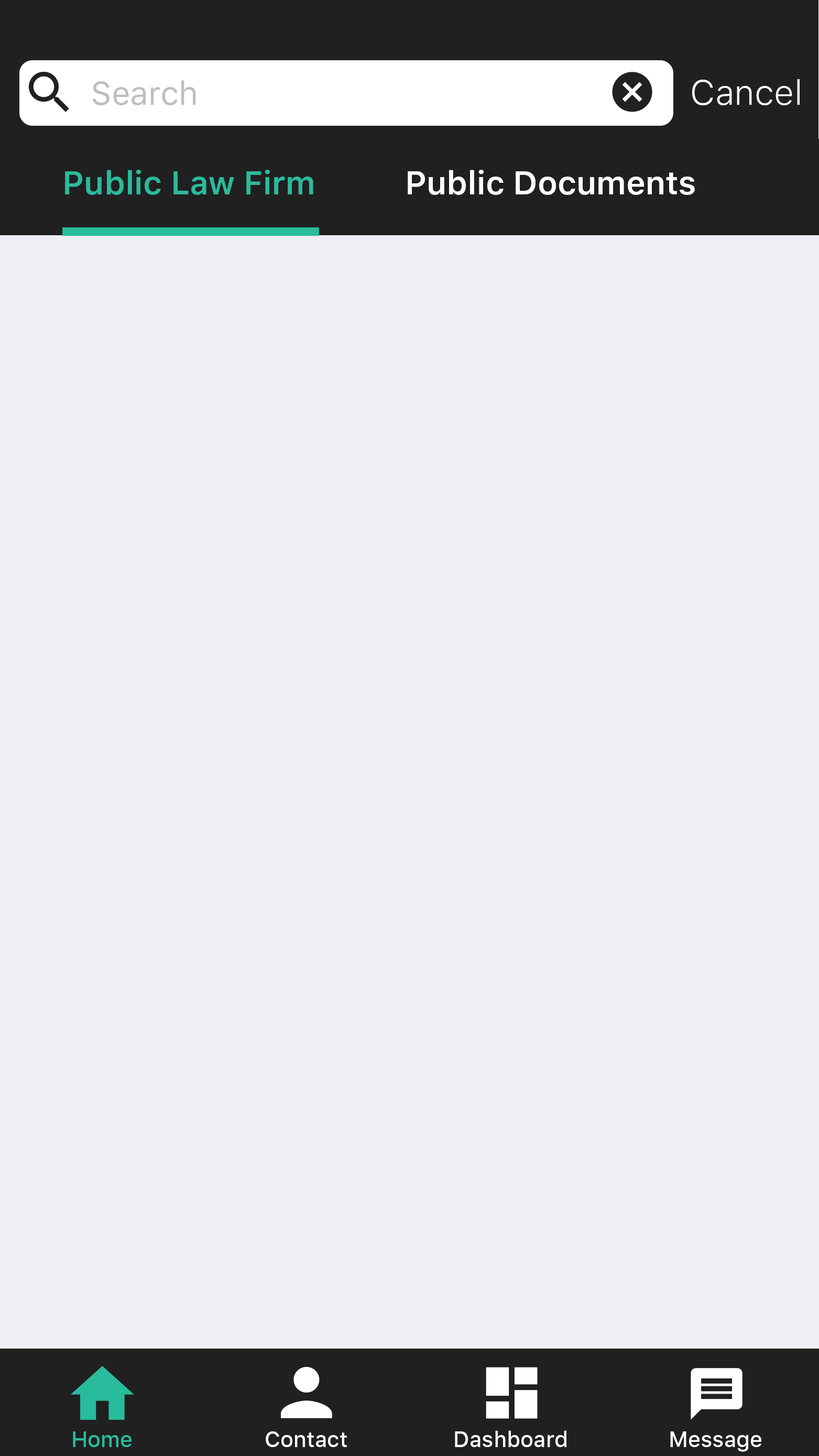
<style>
.page{position:relative;width:819px;height:1456px;background:#efeef5}
.page>*{position:absolute;margin:0}
.t1{font:32.7px "SFUIText-Regular";color:#bcbec0}
.t2{font:34.9px "SFUIText-Light";color:#ffffff}
.t3{font:32.7px "SFUIText-Semibold";color:#2bba9c}
.t4{font:32.7px "SFUIText-Semibold";color:#ffffff}
.t5{font:21.8px "SFUIText-Medium";color:#28bc9c}
.t6{font:21.8px "SFUIText-Medium";color:#ffffff}
</style>
<div class="page">
<p class="t1" style="left:92px;top:80px;width:104px;height:25px">Search</p>
<p class="t2" style="left:692px;top:79px;width:108px;height:26px">Cancel</p>
<p class="t3" style="left:65px;top:170px;width:248px;height:25px">Public Law Firm</p>
<p class="t4" style="left:408px;top:170px;width:287px;height:25px">Public Documents</p>
<p class="t5" style="left:73px;top:1431px;width:59px;height:16px">Home</p>
<p class="t5" style="left:74px;top:1431px;width:59px;height:16px">Home</p>
<p class="t6" style="left:266px;top:1431px;width:81px;height:16px">Contact</p>
<p class="t6" style="left:455px;top:1430px;width:111px;height:17px">Dashboard</p>
<p class="t6" style="left:670px;top:1431px;width:91px;height:21px">Message</p>
</div>
